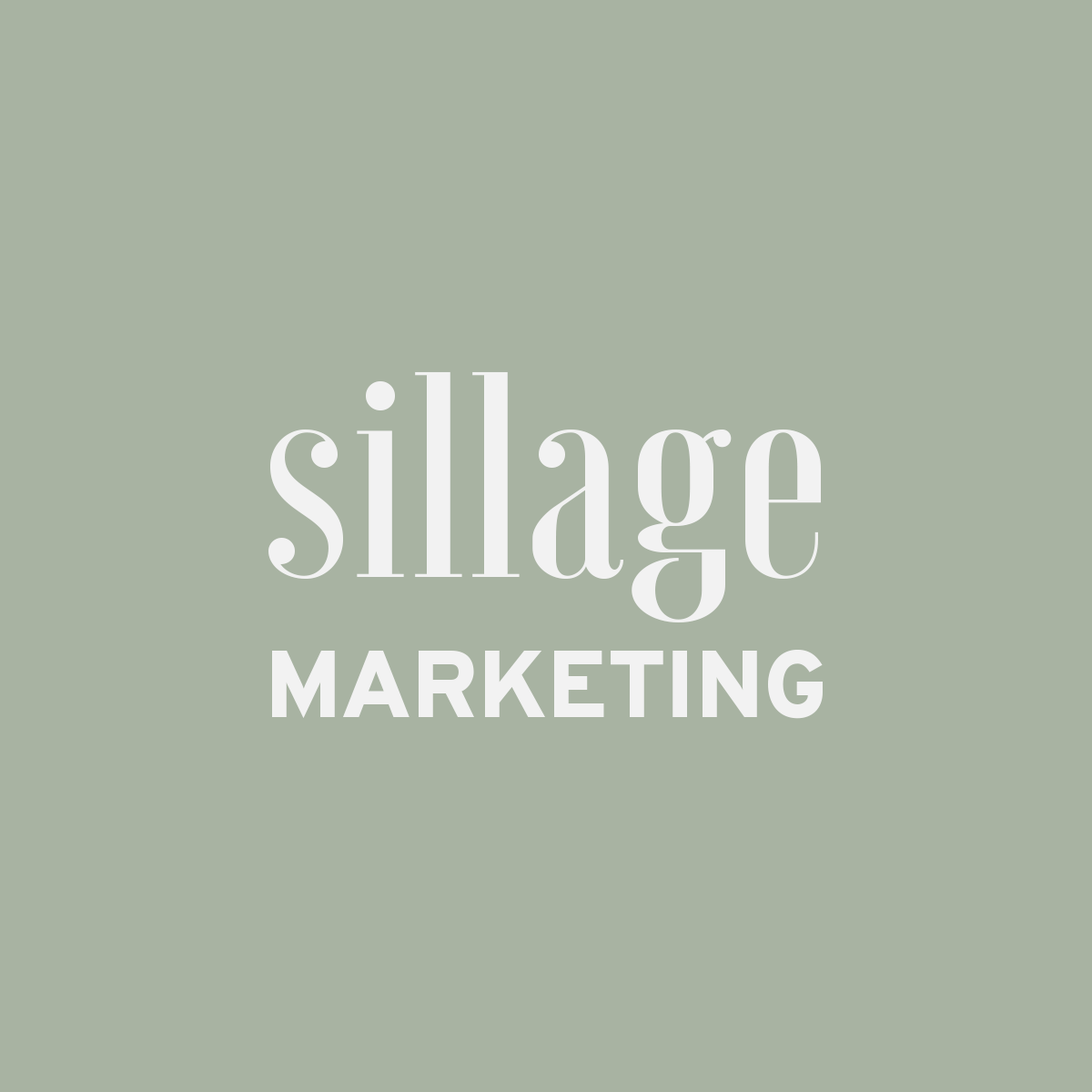
<style>
.page{position:relative;width:1092px;height:1092px;background:#a8b3a2}
.page>*{position:absolute;margin:0}
.t1{font:292px "Voga-Medium";color:#f2f2f2}
.t2{font:94.8px "Overpass-Heavy";color:#f2f2f2}
</style>
<div class="page">
<p class="t1" style="left:268px;top:371px;width:553px;height:252px">sillage</p>
<p class="t2" style="left:272px;top:650px;width:551px;height:69px">MARKETING</p>
</div>
